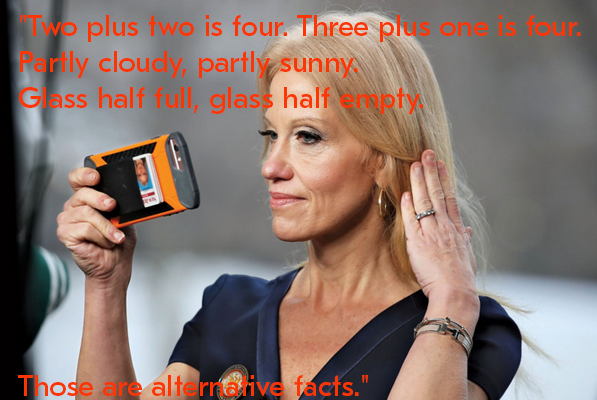
<style>
.page{position:relative;width:597px;height:400px}
.page>*{position:absolute;margin:0}
.t1{font:30px "GTEestiProText-Regular";color:#fb3504}
</style>
<div class="page">
<p class="t1" style="left:18px;top:15px;width:563px;height:381px">"Two plus two is four. Three plus one is four. <br>Partly cloudy, partly sunny. <br>Glass half full, glass half empty. <br><br><br><br><br><br><br><br>Those are alternative facts."</p>
</div>
